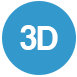
<style>
.page{position:relative;width:77px;height:77px;background:#3399cc}
.page>*{position:absolute;margin:0}
.t1{font:35.4px "CoolveticaRg-Regular";color:#ffffff}
</style>
<div class="page">
<p class="t1" style="left:20px;top:25px;width:38px;height:25px">3D</p>
</div>
